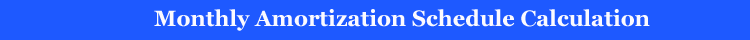
<style>
.page{position:relative;width:750px;height:40px;background:#1e59ff}
.page>*{position:absolute;margin:0}
.t1{font:22px "Georgia-Bold";color:#fbfaff}
</style>
<div class="page">
<p class="t1" style="left:154px;top:9px;width:496px;height:22px">Monthly Amortization Schedule Calculation</p>
</div>
